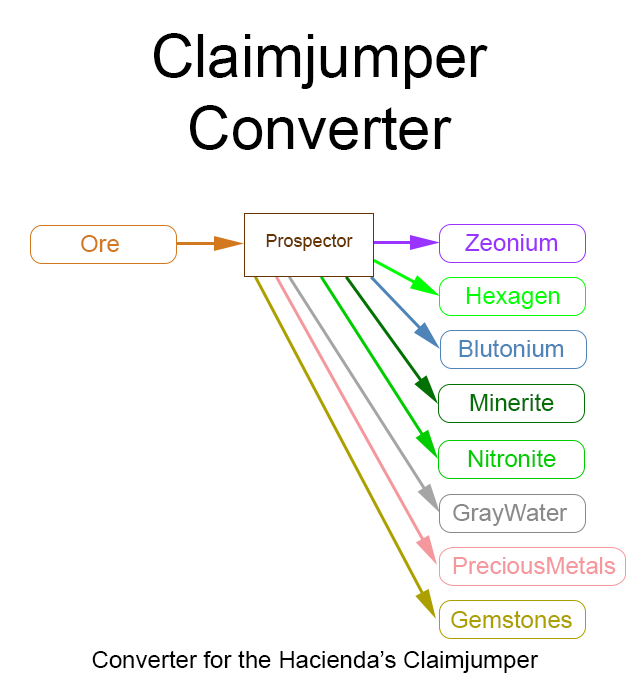
<style>
.page{position:relative;width:642px;height:687px;background:#ffffff}
.page>*{position:absolute;margin:0}
.t1{font:60px "ArialMT";color:#000000}
.t2{font:24px "ArialMT";color:#d2791f}
.t3{font:18px "ArialMT";color:#663401}
.t4{font:24px "ArialMT";color:#9933ff}
.t5{font:24px "ArialMT";color:#00ff00}
.t6{font:24px "ArialMT";color:#4f84b9}
.t7{font:24px "ArialMT";color:#027002}
.t8{font:24px "ArialMT";color:#00cc00}
.t9{font:24px "ArialMT";color:#898989}
.t10{font:24px "ArialMT";color:#f5989d}
.t11{font:24px "ArialMT";color:#aba000}
.t12{font:24px "ArialMT";color:#000000}
</style>
<div class="page">
<p class="t1" style="left:154px;top:33px;width:334px;height:117px;text-align:center">Claimjumper<br>Converter</p>
<p class="t2" style="left:81px;top:235px;width:38px;height:17px">Ore</p>
<p class="t3" style="left:266px;top:234px;width:87px;height:17px">Prospector</p>
<p class="t4" style="left:465px;top:234px;width:93px;height:17px">Zeonium</p>
<p class="t5" style="left:466px;top:287px;width:94px;height:22px">Hexagen</p>
<p class="t6" style="left:459px;top:339px;width:105px;height:18px">Blutonium</p>
<p class="t7" style="left:470px;top:393px;width:84px;height:18px">Minerite</p>
<p class="t8" style="left:468px;top:449px;width:88px;height:18px">Nitronite</p>
<p class="t9" style="left:453px;top:503px;width:115px;height:23px">GrayWater</p>
<p class="t10" style="left:453px;top:556px;width:163px;height:18px">PreciousMetals</p>
<p class="t11" style="left:451px;top:610px;width:121px;height:18px">Gemstones</p>
<p class="t12" style="left:92px;top:650px;width:447px;height:23px">Converter for the Hacienda’s Claimjumper</p>
</div>
